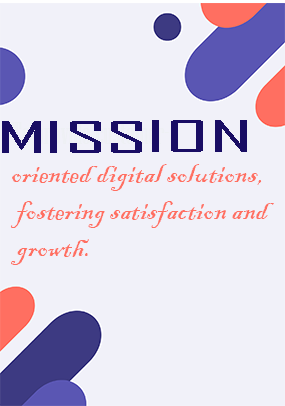
<style>
.page{position:relative;width:285px;height:406px;background:#f1f1f9}
.page>*{position:absolute;margin:0}
.t1{font:42.1px "AgencyFB-Reg";color:#190d64;scale:2.32 1}
.t2{font:31px "BlackadderITC-Regular";color:#ff6f61}
.t3{font:31px "NiagaraEngraved-Reg";color:#a8b4ca}
.t4{font:31px "NiagaraEngraved-Reg";color:#eef0f4}
</style>
<div class="page">
<p class="t1" style="left:2px;top:120px;width:245px;height:33px">MISSION</p>
<p class="t2" style="left:10px;top:122px;width:264px;height:143px"><span class="t3"><br></span><span class="t4">To provide customer-<br></span>oriented digital solutions,<br> fostering satisfaction and<br> growth.</p>
</div>
